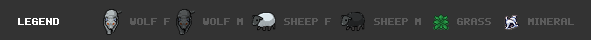
<style>
.page{position:relative;width:591px;height:40px;background:#333333}
.page>*{position:absolute;margin:0}
.t1{font:8px "pixelmix";color:#ffffff;font-weight:bold}
.t2{font:8px "pixelmix";color:#5c5c5c;font-weight:bold}
</style>
<div class="page">
<p class="t1" style="left:18px;top:18px;width:41px;height:7px">LEGEND</p>
<p class="t2" style="left:130px;top:18px;width:40px;height:7px">WOLF F</p>
<p class="t2" style="left:203px;top:18px;width:40px;height:7px">WOLF M</p>
<p class="t2" style="left:284px;top:18px;width:47px;height:7px">SHEEP F</p>
<p class="t2" style="left:374px;top:18px;width:47px;height:7px">SHEEP M</p>
<p class="t2" style="left:457px;top:18px;width:34px;height:7px">GRASS</p>
<p class="t2" style="left:528px;top:18px;width:46px;height:7px">MINERAL</p>
</div>
